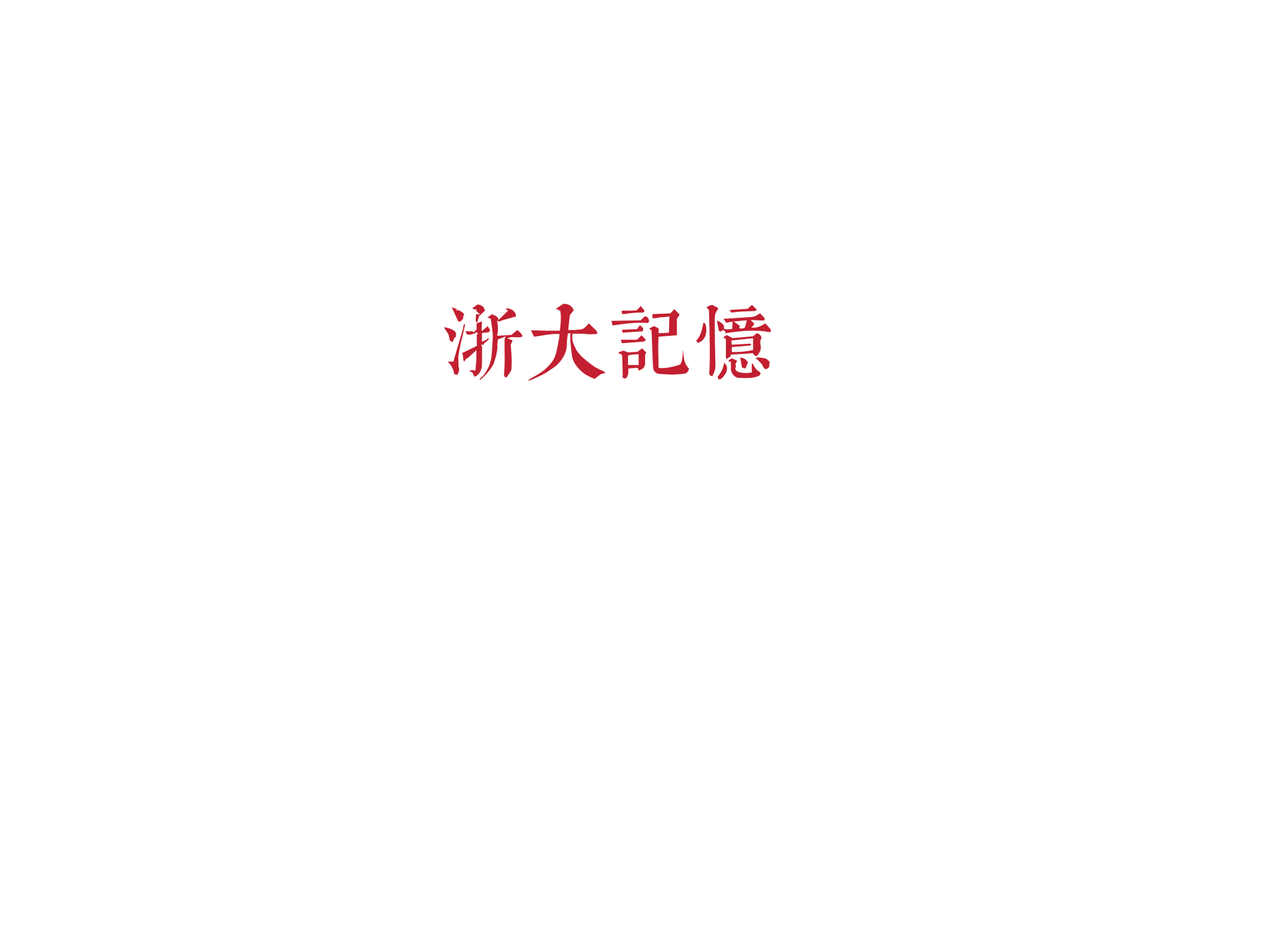
<style>
.page{position:relative;width:1261px;height:946px;background:#ffffff}
.page>*{position:absolute;margin:0}
.t1{font:83.4px "WenYue-GuDianMingChaoTi-NC-W5";color:#c21f30}
</style>
<div class="page">
<p class="t1" style="left:444px;top:304px;width:327px;height:76px">浙大记忆</p>
</div>
